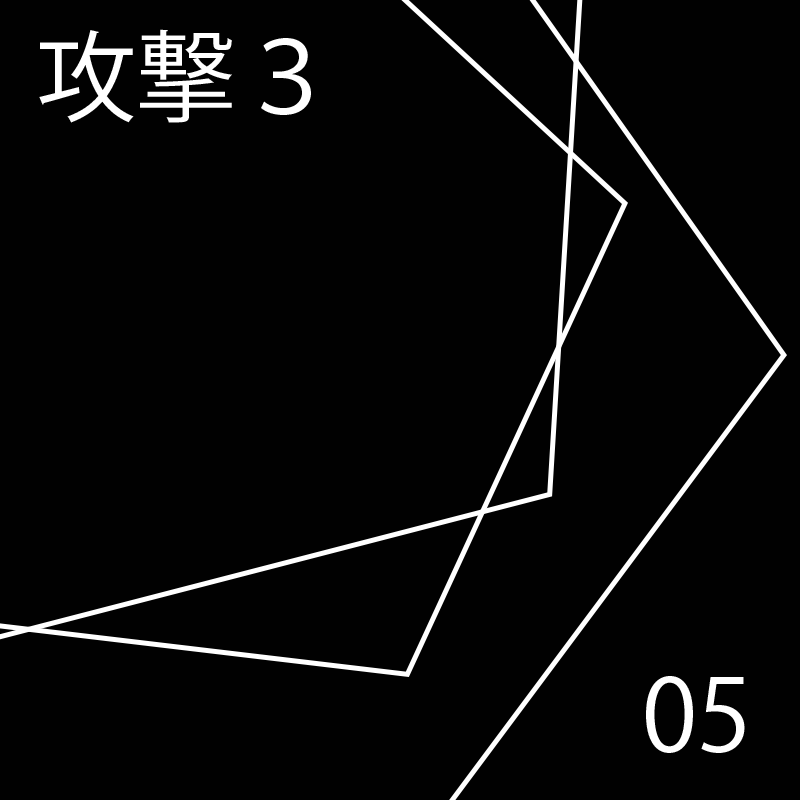
<style>
.page{position:relative;width:800px;height:800px;background:#010101}
.page>*{position:absolute;margin:0}
.t1{font:100px "KozGoPr6N-Regular";color:#ffffff}
</style>
<div class="page">
<p class="t1" style="left:39px;top:29px;width:272px;height:94px">攻撃３</p>
<p class="t1" style="left:39px;top:29px;width:272px;height:94px">攻撃３</p>
<p class="t1" style="left:39px;top:29px;width:272px;height:94px">攻撃３</p>
<p class="t1" style="left:39px;top:29px;width:272px;height:94px">攻撃３</p>
<p class="t1" style="left:39px;top:29px;width:272px;height:94px">攻撃３</p>
<p class="t1" style="left:39px;top:29px;width:272px;height:94px">攻撃３</p>
<p class="t1" style="left:646px;top:676px;width:102px;height:77px">00</p>
<p class="t1" style="left:646px;top:676px;width:85px;height:77px">01</p>
<p class="t1" style="left:646px;top:676px;width:101px;height:77px">02</p>
<p class="t1" style="left:646px;top:676px;width:99px;height:77px">03</p>
<p class="t1" style="left:646px;top:676px;width:105px;height:77px">04</p>
<p class="t1" style="left:646px;top:676px;width:99px;height:77px">05</p>
</div>
